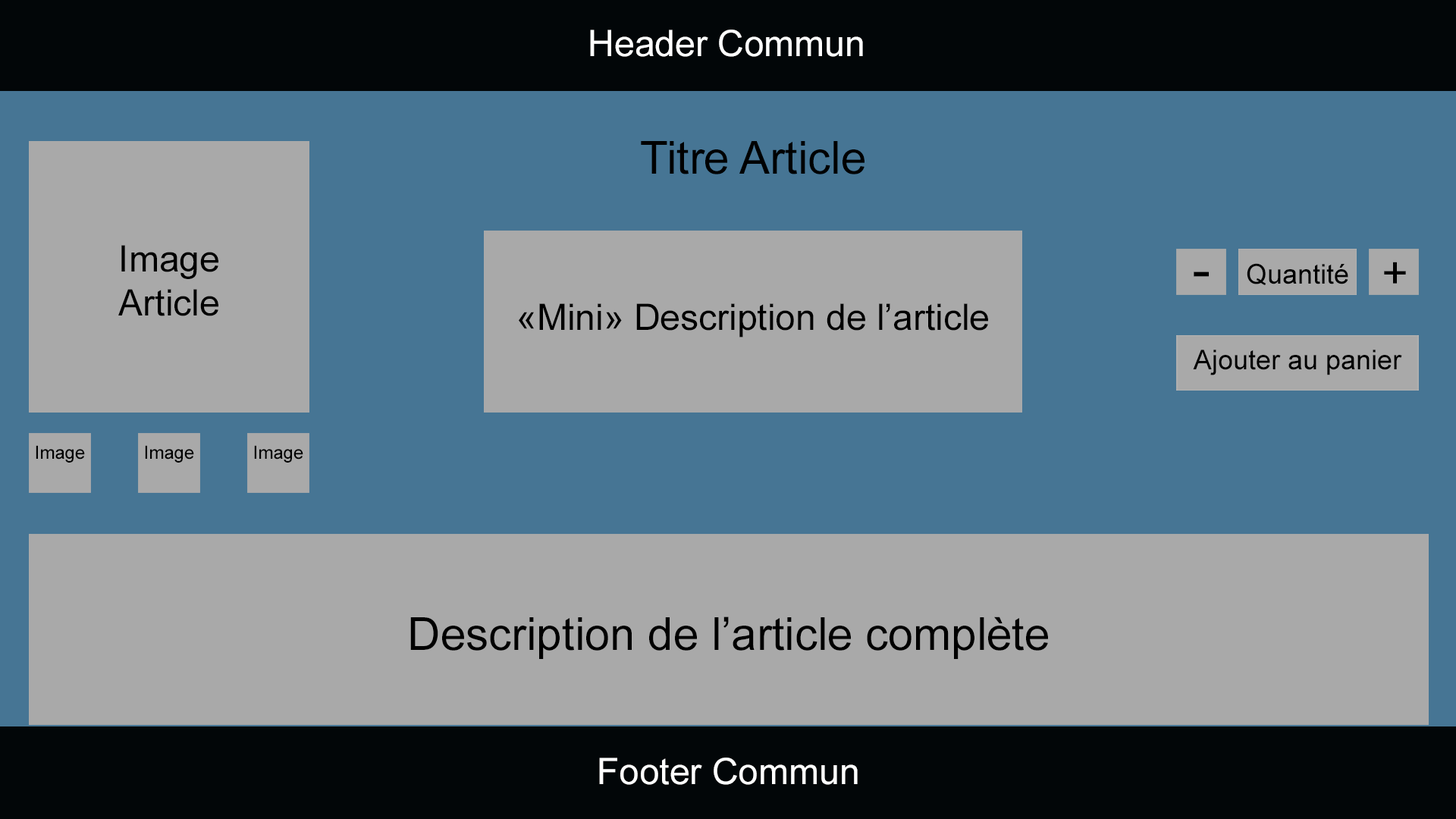
<style>
.page{position:relative;width:1456px;height:819px;background:#467594}
.page>*{position:absolute;margin:0}
.t1{font:36.5px "ArialMT";color:#ffffff}
.t2{font:45.5px "ArialMT";color:#000000}
.t3{font:36.4px "ArialMT";color:#000000}
.t4{font:18.2px "ArialMT";color:#000000}
.t5{font:36.4px "ArialMT";color:#ffffff}
</style>
<div class="page">
<p class="t1" style="left:590px;top:30px;width:273px;height:27px">Header Commun</p>
<p class="t2" style="left:641px;top:141px;width:223px;height:33px">Titre Article</p>
<p class="t3" style="left:118px;top:245px;width:100px;height:71px;text-align:center">Image<br>Article</p>
<p class="t3" style="left:519px;top:303px;width:469px;height:34px">«Mini» Description de l’article</p>
<p class="t4" style="left:36px;top:445px;width:49px;height:18px">Image</p>
<p class="t4" style="left:145px;top:445px;width:49px;height:18px">Image</p>
<p class="t4" style="left:254px;top:445px;width:49px;height:18px">Image</p>
<p class="t2" style="left:410px;top:617px;width:638px;height:42px">Description de l’article complète</p>
<p class="t5" style="left:599px;top:758px;width:259px;height:27px">Footer Commun</p>
</div>
